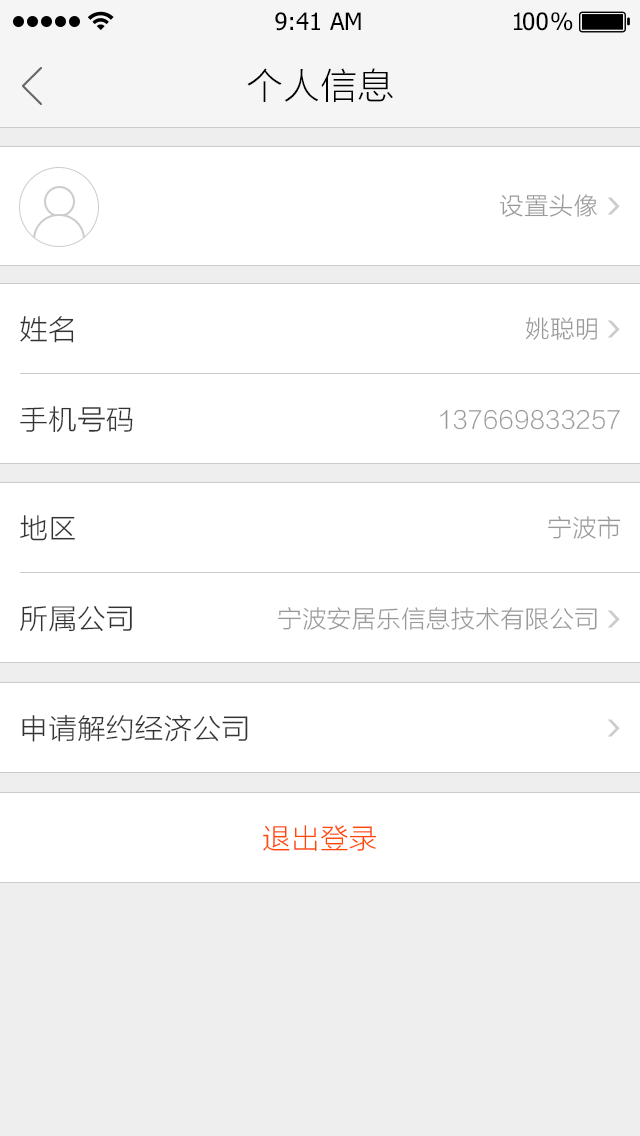
<style>
.page{position:relative;width:640px;height:1136px;background:#ffffff}
.page>*{position:absolute;margin:0}
.t1{font:24px "Tahoma";color:#000000}
.t2{font:24px "Tahoma";letter-spacing:-0.1em;color:#000000}
.t3{font:24px "Tahoma";letter-spacing:-0.25em;color:#000000}
.t4{font:36px "STHeitiSC-Light";color:#000000}
.t5{font:24px "STHeitiSC-Light";color:#999999}
.t6{font:28px "STHeitiSC-Light";color:#333333}
.t7{font:28px "STHeitiSC-Light";color:#ff4800}
</style>
<div class="page">
<p class="t1" style="left:275px;top:12px;width:86px;height:19px">9:41 AM</p>
<p class="t2" style="left:514px;top:12px;width:59px;height:19px">1<span class="t1">0</span><span class="t3">0 </span>%</p>
<p class="t4" style="left:247px;top:68px;width:146px;height:34px">个人信息</p>
<p class="t5" style="left:500px;top:194px;width:97px;height:23px">设置头像</p>
<p class="t6" style="left:20px;top:316px;width:54px;height:27px">姓名</p>
<p class="t5" style="left:525px;top:317px;width:72px;height:23px">姚聪明</p>
<p class="t6" style="left:20px;top:406px;width:113px;height:27px">手机号码</p>
<p class="t5" style="left:440px;top:409px;width:180px;height:21px">137669833257</p>
<p class="t6" style="left:20px;top:515px;width:55px;height:26px">地区</p>
<p class="t5" style="left:548px;top:516px;width:73px;height:23px">宁波市</p>
<p class="t6" style="left:20px;top:606px;width:112px;height:26px">所属公司</p>
<p class="t5" style="left:278px;top:607px;width:319px;height:23px">宁波安居乐信息技术有限公司</p>
<p class="t6" style="left:22px;top:715px;width:226px;height:27px">申请解约经济公司</p>
<p class="t7" style="left:263px;top:825px;width:114px;height:26px">退出登录</p>
</div>
